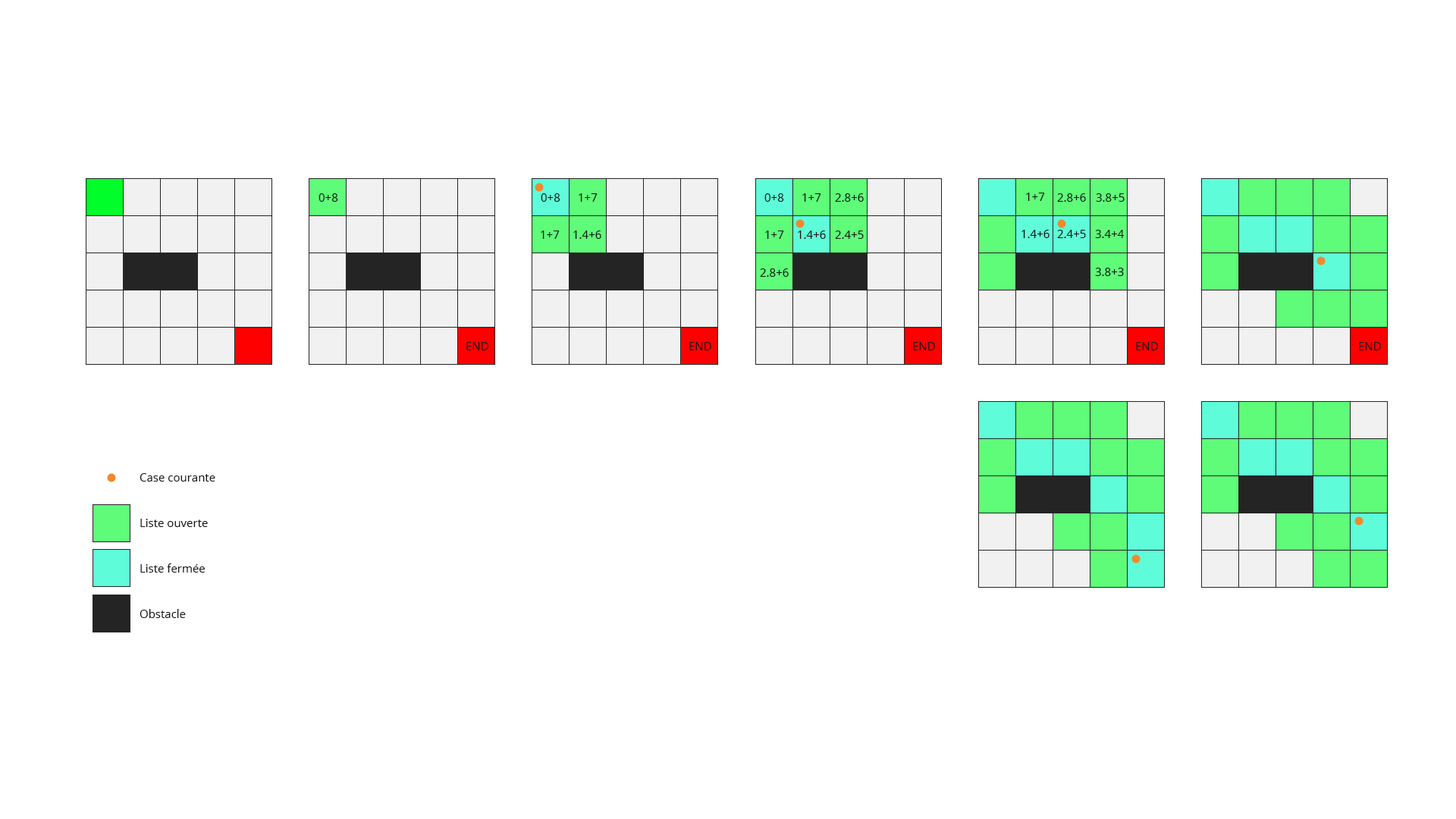
<style>
.page{position:relative;width:1456px;height:819px;background:#ffffff}
.page>*{position:absolute;margin:0}
.t1{font:11.4px "OpenSans";color:#161616}
</style>
<div class="page">
<p class="t1" style="left:318px;top:193px;width:20px;height:9px">0+8</p>
<p class="t1" style="left:541px;top:193px;width:19px;height:9px">0+8</p>
<p class="t1" style="left:579px;top:193px;width:19px;height:9px">1+7</p>
<p class="t1" style="left:764px;top:193px;width:20px;height:9px">0+8</p>
<p class="t1" style="left:802px;top:193px;width:19px;height:9px">1+7</p>
<p class="t1" style="left:835px;top:193px;width:29px;height:9px">2.8+6</p>
<p class="t1" style="left:1026px;top:193px;width:19px;height:8px">1+7</p>
<p class="t1" style="left:1057px;top:193px;width:29px;height:9px">2.8+6</p>
<p class="t1" style="left:1096px;top:193px;width:29px;height:9px">3.8+5</p>
<p class="t1" style="left:541px;top:231px;width:19px;height:8px">1+7</p>
<p class="t1" style="left:573px;top:231px;width:28px;height:8px">1.4+6</p>
<p class="t1" style="left:765px;top:231px;width:19px;height:8px">1+7</p>
<p class="t1" style="left:798px;top:231px;width:28px;height:8px">1.4+6</p>
<p class="t1" style="left:835px;top:231px;width:29px;height:8px">2.4+5</p>
<p class="t1" style="left:1021px;top:230px;width:29px;height:8px">1.4+6</p>
<p class="t1" style="left:1057px;top:230px;width:29px;height:8px">2.4+5</p>
<p class="t1" style="left:1095px;top:230px;width:30px;height:8px">3.4+4</p>
<p class="t1" style="left:760px;top:268px;width:29px;height:9px">2.8+6</p>
<p class="t1" style="left:1095px;top:268px;width:29px;height:8px">3.8+3</p>
<p class="t1" style="left:466px;top:342px;width:22px;height:8px">END</p>
<p class="t1" style="left:689px;top:342px;width:22px;height:8px">END</p>
<p class="t1" style="left:913px;top:342px;width:22px;height:8px">END</p>
<p class="t1" style="left:1136px;top:342px;width:22px;height:8px">END</p>
<p class="t1" style="left:1359px;top:342px;width:22px;height:8px">END</p>
<p class="t1" style="left:140px;top:473px;width:75px;height:9px">Case courante</p>
<p class="t1" style="left:140px;top:519px;width:68px;height:8px">Liste ouverte</p>
<p class="t1" style="left:140px;top:563px;width:65px;height:10px">Liste fermée</p>
<p class="t1" style="left:140px;top:609px;width:46px;height:9px">Obstacle</p>
</div>
